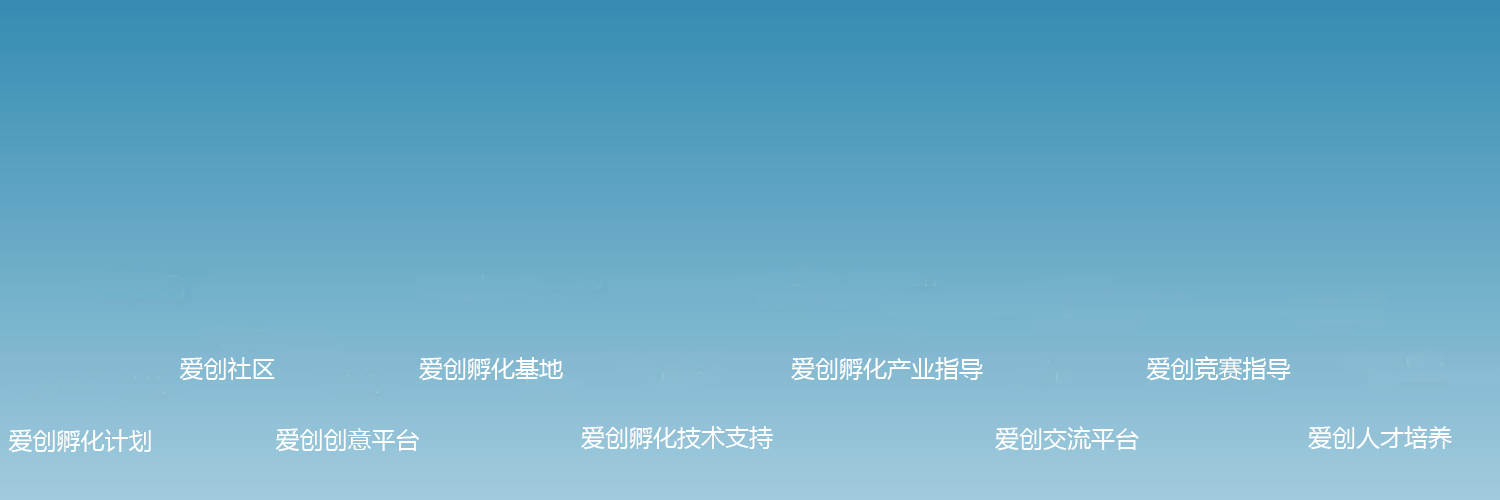
<style>
.page{position:relative;width:1500px;height:500px}
.page>*{position:absolute;margin:0}
.t1{font:24px "MicrosoftYaHei";color:#ffffff}
</style>
<div class="page">
<p class="t1" style="left:179px;top:357px;width:96px;height:24px">爱创社区</p>
<p class="t1" style="left:419px;top:357px;width:144px;height:24px">爱创孵化基地</p>
<p class="t1" style="left:791px;top:357px;width:192px;height:24px">爱创孵化产业指导</p>
<p class="t1" style="left:1146px;top:356px;width:145px;height:25px">爱创竞赛指导</p>
<p class="t1" style="left:8px;top:429px;width:143px;height:24px">爱创孵化计划</p>
<p class="t1" style="left:275px;top:428px;width:145px;height:24px">爱创创意平台</p>
<p class="t1" style="left:581px;top:426px;width:192px;height:24px">爱创孵化技术支持</p>
<p class="t1" style="left:995px;top:426px;width:144px;height:25px">爱创交流平台</p>
<p class="t1" style="left:1308px;top:426px;width:144px;height:24px">爱创人才培养</p>
</div>
